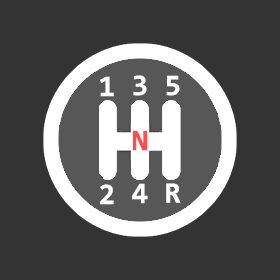
<style>
.page{position:relative;width:280px;height:280px;background:#333333}
.page>*{position:absolute;margin:0}
.t1{font:30px "Consolas-Bold";color:#ffffff}
.t2{font:30px "Consolas-Bold";color:#ff4c4c}
</style>
<div class="page">
<p class="t1" style="left:100px;top:76px;width:14px;height:21px">1</p>
<p class="t1" style="left:133px;top:75px;width:14px;height:21px">3</p>
<p class="t1" style="left:166px;top:75px;width:14px;height:21px">5</p>
<p class="t2" style="left:132px;top:130px;width:15px;height:21px">N</p>
<p class="t1" style="left:100px;top:184px;width:14px;height:21px">2</p>
<p class="t1" style="left:132px;top:183px;width:16px;height:21px">4</p>
<p class="t1" style="left:166px;top:183px;width:15px;height:20px">R</p>
</div>
